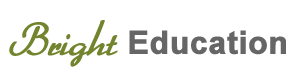
<style>
.page{position:relative;width:296px;height:80px;background:#ffffff}
.page>*{position:absolute;margin:0}
.t1{font:32.7px "BetterHeather";color:#72842e;font-weight:bold}
.t2{font:31.6px "Arial-BoldMT";color:#666666;font-weight:bold}
</style>
<div class="page">
<p class="t1" style="left:9px;top:20px;width:109px;height:47px">Bright</p>
<p class="t2" style="left:129px;top:30px;width:157px;height:25px">Education</p>
</div>
